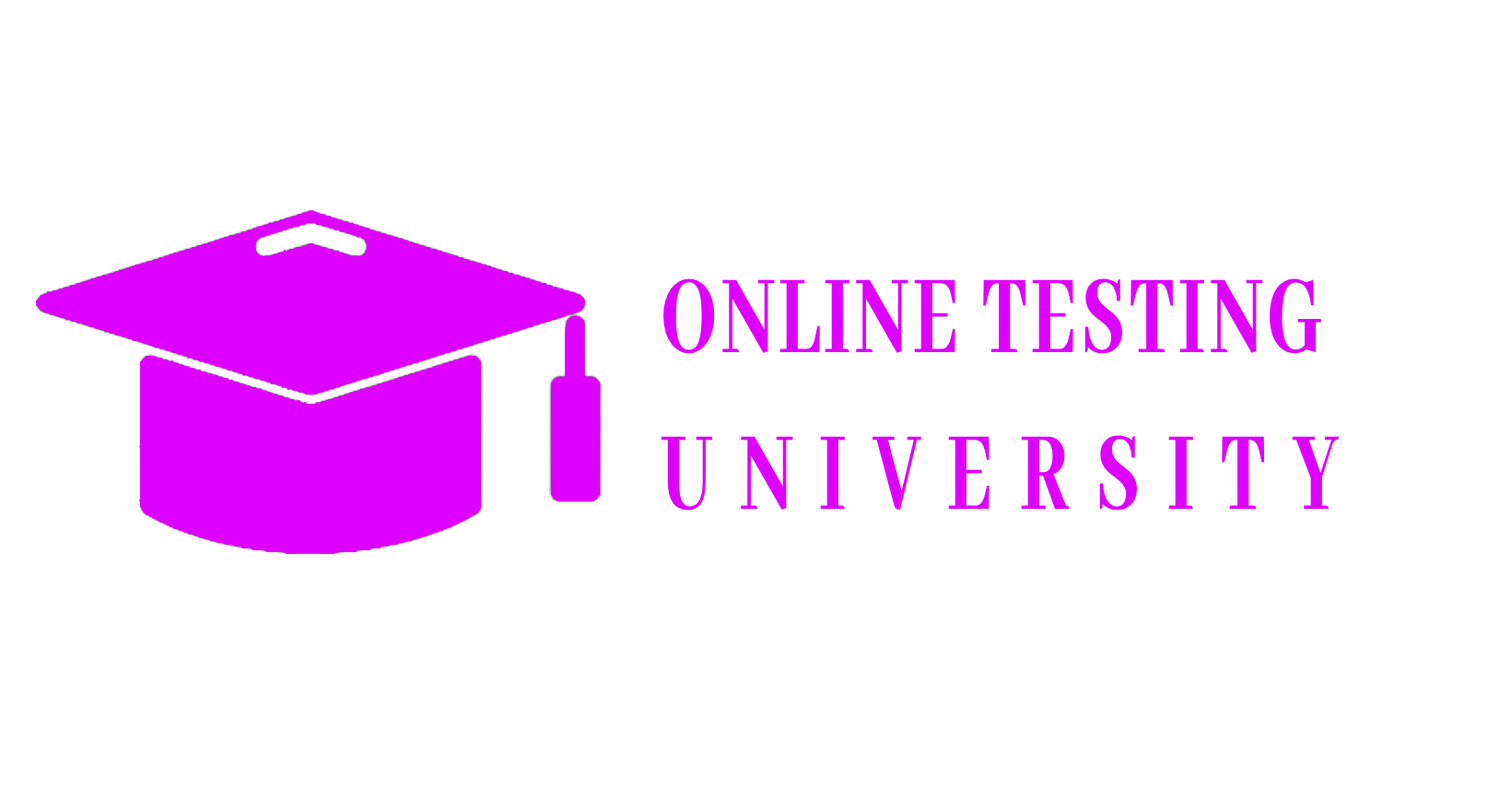
<style>
.page{position:relative;width:1511px;height:789px;background:#ffffff}
.page>*{position:absolute;margin:0}
.t1{font:123.2px/78.3px "AbhayaLibre-ExtraBold";letter-spacing:0.05em;color:#de00ff;scale:0.67 1}
.t2{font:123.2px/78.3px "AbhayaLibre-ExtraBold";letter-spacing:0.325em;color:#de00ff;scale:0.67 1}
</style>
<div class="page">
<p class="t1" style="left:661px;top:278px;width:679px;height:233px">ONLINE TESTING<br><br><span class="t2">UNIVERSITY</span></p>
</div>
